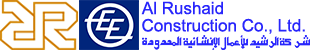
<style>
.page{position:relative;width:312px;height:50px;background:#ffffff}
.page>*{position:absolute;margin:0}
.t1{font:17px "ArialMT";color:#2725fc}
</style>
<div class="page">
<p class="t1" style="left:141px;top:1px;width:82px;height:14px">Al Rushaid</p>
<p class="t1" style="left:142px;top:18px;width:163px;height:16px">Construction Co., Ltd.</p>
</div>
